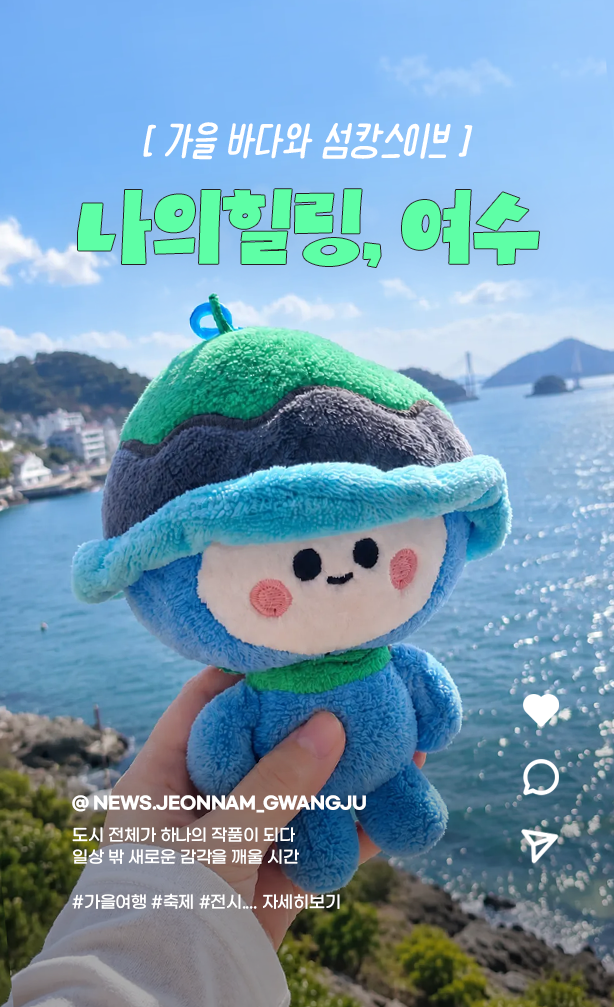
<style>
.page{position:relative;width:614px;height:1007px}
.page>*{position:absolute;margin:0}
.t1{font:40px "Nelna_Yesam-Rg";color:#ffffff;font-style:italic;scale:1.1 1}
.t2{font:84.8px "KIMWILDgag-Bold";letter-spacing:-0.06em;color:#5effa6;scale:0.95 1}
.t3{font:47.8px "KIMWILDgag-Bold";letter-spacing:-0.06em;color:#5effa6;scale:0.95 1}
.t4{font:17px "GmarketSansBold";letter-spacing:-0.02em;color:#ffffff;text-transform:uppercase}
.t5{font:16.7px/22.3px "GmarketSansMedium";letter-spacing:-0.02em;color:#ffffff}
</style>
<div class="page">
<p class="t1" style="left:143px;top:122px;width:330px;height:38px">[ 가을 바다와 섬캉스이브 ]</p>
<p class="t2" style="left:78px;top:189px;width:461px;height:78px"><span class="t3"> </span>나의힐링, 여수</p>
<p class="t4" style="left:72px;top:795px;width:294px;height:18px">@ news.jeonnam_gwangju</p>
<p class="t4" style="left:72px;top:795px;width:294px;height:18px">@ news.jeonnam_gwangju</p>
<p class="t4" style="left:72px;top:795px;width:294px;height:18px">@ news.jeonnam_gwangju</p>
<p class="t4" style="left:72px;top:795px;width:294px;height:18px">@ news.jeonnam_gwangju</p>
<p class="t5" style="left:72px;top:827px;width:268px;height:82px">도시 전체가 하나의 작품이 되다<br>일상 밖 새로운 감각을 깨울 시간<br><br>#가을여행 #축제 #전시.... 자세히보기</p>
<p class="t5" style="left:72px;top:827px;width:268px;height:82px">도시 전체가 하나의 작품이 되다<br>일상 밖 새로운 감각을 깨울 시간<br><br>#가을여행 #축제 #전시.... 자세히보기</p>
<p class="t5" style="left:72px;top:827px;width:268px;height:82px">도시 전체가 하나의 작품이 되다<br>일상 밖 새로운 감각을 깨울 시간<br><br>#가을여행 #축제 #전시.... 자세히보기</p>
<p class="t5" style="left:72px;top:827px;width:268px;height:82px">도시 전체가 하나의 작품이 되다<br>일상 밖 새로운 감각을 깨울 시간<br><br>#가을여행 #축제 #전시.... 자세히보기</p>
</div>
